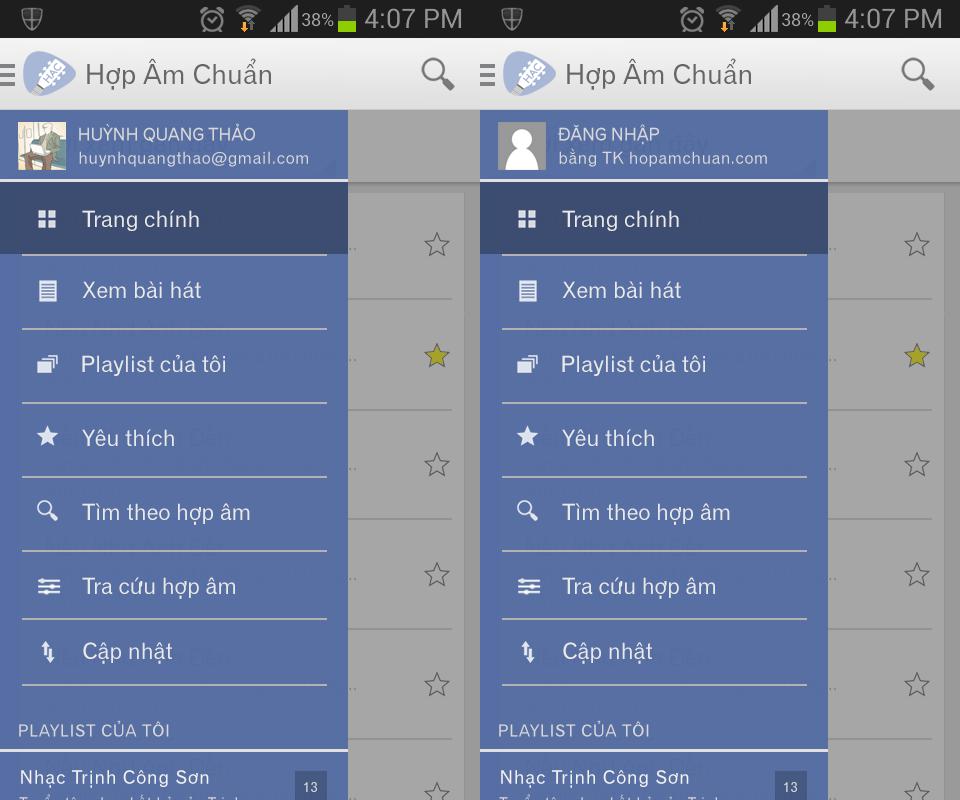
<style>
.page{position:relative;width:960px;height:800px;background:#576fa3}
.page>*{position:absolute;margin:0}
.t1{font:27px "UVNGioMay";color:#666666}
.t2{font:17px "UVNGioMay";color:#d8d8d8}
.t3{font:16px "UVNGioMay";letter-spacing:0.04em;color:#d9d9d9}
.t4{font:22px "UVNGioMay";color:#e9e9e9}
.t5{font:16px "UVNGioMay";letter-spacing:0.05em;color:#d8d8d8}
.t6{font:18px "UVNGioMay";letter-spacing:0.05em;color:#f2f2f2}
.t7{font:14px "UVNGioMay";letter-spacing:0.05em;color:#d6d6d6}
</style>
<div class="page">
<p class="t1" style="left:87px;top:58px;width:184px;height:32px">Hợp Âm Chuẩn</p>
<p class="t1" style="left:567px;top:58px;width:184px;height:32px">Hợp Âm Chuẩn</p>
<p class="t2" style="left:79px;top:123px;width:176px;height:20px">HUỲNH QUANG THẢO</p>
<p class="t2" style="left:558px;top:124px;width:101px;height:21px">ĐĂNG NHẬP</p>
<p class="t3" style="left:559px;top:148px;width:208px;height:19px">bằng TK hopamchuan.com</p>
<p class="t3" style="left:79px;top:151px;width:229px;height:16px">huynhquangthao@gmail.com</p>
<p class="t4" style="left:82px;top:210px;width:117px;height:21px">Trang chính</p>
<p class="t4" style="left:562px;top:210px;width:117px;height:21px">Trang chính</p>
<p class="t4" style="left:82px;top:281px;width:119px;height:17px">Xem bài hát</p>
<p class="t4" style="left:562px;top:281px;width:119px;height:17px">Xem bài hát</p>
<p class="t4" style="left:82px;top:354px;width:143px;height:22px">Playlist của tôi</p>
<p class="t4" style="left:562px;top:354px;width:143px;height:22px">Playlist của tôi</p>
<p class="t4" style="left:82px;top:429px;width:92px;height:17px">Yêu thích</p>
<p class="t4" style="left:562px;top:429px;width:92px;height:17px">Yêu thích</p>
<p class="t4" style="left:82px;top:503px;width:168px;height:22px">Tìm theo hợp âm</p>
<p class="t4" style="left:562px;top:503px;width:168px;height:22px">Tìm theo hợp âm</p>
<p class="t4" style="left:82px;top:577px;width:153px;height:22px">Tra cứu hợp âm</p>
<p class="t4" style="left:562px;top:577px;width:153px;height:22px">Tra cứu hợp âm</p>
<p class="t4" style="left:83px;top:642px;width:89px;height:22px">Cập nhật</p>
<p class="t4" style="left:563px;top:642px;width:89px;height:22px">Cập nhật</p>
<p class="t5" style="left:19px;top:720px;width:150px;height:17px">PLAYLIST CỦA TÔI</p>
<p class="t5" style="left:499px;top:720px;width:150px;height:17px">PLAYLIST CỦA TÔI</p>
<p class="t6" style="left:21px;top:770px;width:188px;height:18px">Nhạc Trịnh Công Sơn</p>
<p class="t6" style="left:501px;top:770px;width:188px;height:18px">Nhạc Trịnh Công Sơn</p>
<p class="t7" style="left:304px;top:782px;width:13px;height:10px">13</p>
<p class="t7" style="left:784px;top:782px;width:13px;height:10px">13</p>
</div>
